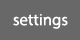
<style>
.page{position:relative;width:80px;height:40px;background:#686868}
.page>*{position:absolute;margin:0}
.t1{font:16.7px "MyriadPro-Regular";color:#fefefe}
</style>
<div class="page">
<p class="t1" style="left:13px;top:13px;width:55px;height:16px">settings</p>
</div>
